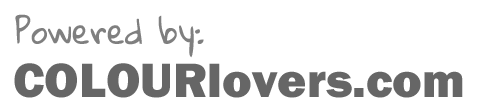
<style>
.page{position:relative;width:480px;height:110px;background:#ffffff}
.page>*{position:absolute;margin:0}
.t1{font:33.3px "GloriaHallelujah";color:#7f7f7f}
.t2{font:50px "FranklinGothic-Heavy";color:#666666}
</style>
<div class="page">
<p class="t1" style="left:15px;top:14px;width:189px;height:44px">Powered by:</p>
<p class="t2" style="left:14px;top:63px;width:449px;height:35px">COLOURlovers.com</p>
</div>
